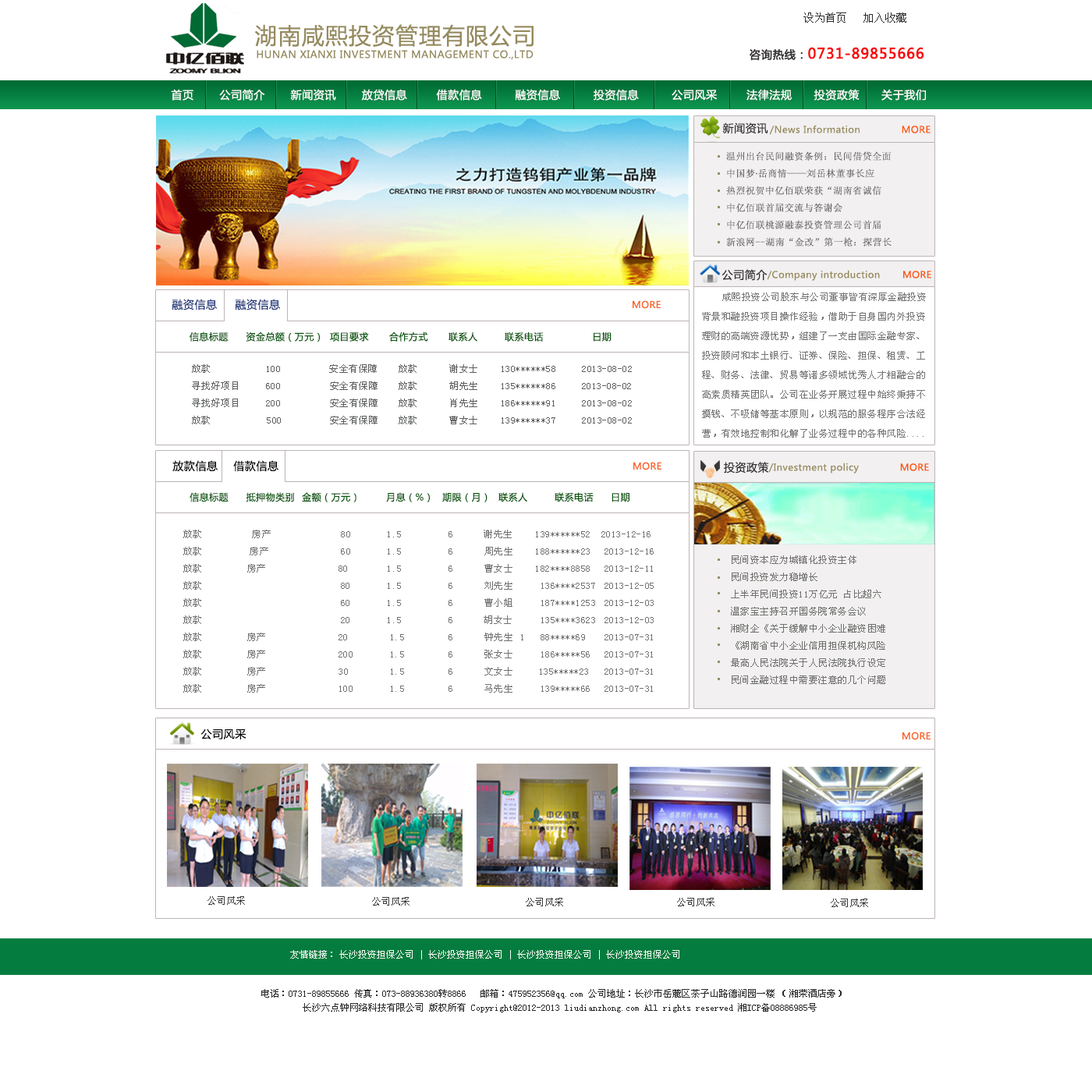
<style>
.page{position:relative;width:1092px;height:1092px;background:#ffffff}
.page>*{position:absolute;margin:0}
.t1{font:10.9px "SimSun";color:#2c2c2c}
.t2{font:22.6px "MicrosoftYaHei";letter-spacing:0.04em;color:#968b5e}
.t3{font:10px "MicrosoftYaHei";letter-spacing:0.04em;color:#968b5e}
.t4{font:14px "MicrosoftYaHei";letter-spacing:0.04em;color:#fa0606;font-weight:bold}
.t5{font:10.9px "MicrosoftYaHei";letter-spacing:0.04em;color:#333030;font-weight:bold}
.t6{font:10.9px "MicrosoftYaHei";letter-spacing:0.04em;color:#ffffff}
.t7{font:10.9px "MicrosoftYaHei";letter-spacing:0.04em;color:#333030}
.t8{font:9.4px "MicrosoftYaHei";letter-spacing:0.04em;color:#968b5e}
.t9{font:9.4px "MicrosoftYaHei";letter-spacing:0.04em;color:#fa5403}
.t10{font:9.4px/17.2px "SimSun";letter-spacing:0.04em;color:#666363}
.t11{font:9.4px/17.2px "MicrosoftYaHei";letter-spacing:0.04em;color:#666363}
.t12{font:9.4px/19.5px "SimSun";letter-spacing:0.04em;color:#757474}
.t13{font:10.9px "MicrosoftYaHei";letter-spacing:0.04em;color:#23387b}
.t14{font:9.4px "MicrosoftYaHei";letter-spacing:0.04em;color:#fa6123}
.t15{font:9.4px "MicrosoftYaHei";letter-spacing:0.04em;color:#055709}
.t16{font:9.4px/17.2px "SimSun";letter-spacing:0.04em;color:#5c5f5d}
.t17{font:10.9px "MicrosoftYaHei";letter-spacing:0.04em;color:#000000}
.t18{font:11.2px "MicrosoftYaHei";letter-spacing:0.04em;color:#333030;scale:0.97 1}
.t19{font:9.4px/17.2px "SimSun";letter-spacing:0.04em;color:#707270}
.t20{font:10.9px "MicrosoftYaHei";letter-spacing:0.04em;color:#000102}
.t21{font:9.4px "SimSun";letter-spacing:0.04em;color:#3d3c3c}
.t22{font:9.4px "SimSun";color:#fcf9f9}
.t23{font:9.4px/14px "SimSun";color:#2b2929}
</style>
<div class="page">
<p class="t1" style="left:803px;top:12px;width:103px;height:11px">设为首页   加入收藏</p>
<p class="t2" style="left:255px;top:24px;width:279px;height:23px">湖南咸熙投资管理有限公司</p>
<p class="t3" style="left:257px;top:50px;width:277px;height:10px">HUNAN XIANXI INVESTMENT MANAGEMENT CO.,LTD</p>
<p class="t4" style="left:750px;top:47px;width:174px;height:14px"><span class="t5">咨询热线：</span>0731-89855666</p>
<p class="t6" style="left:171px;top:89px;width:755px;height:12px">首页       公司简介       新闻资讯       放贷信息        借款信息         融资信息         投资信息         公司风采        法律法规      投资政策      关于我们</p>
<p class="t7" style="left:722px;top:122px;width:46px;height:12px">新闻资讯</p>
<p class="t8" style="left:769px;top:125px;width:162px;height:10px">/News Information             <span class="t9">MORE</span></p>
<p class="t10" style="left:726px;top:151px;width:166px;height:95px">温州出台民间融资条例：民间借贷全面<br>中国梦<span class="t11">∙</span>岳商情——刘岳林董事长应<br>热烈祝贺中亿佰联荣获“湖南省诚信<br>中亿佰联首届交流与答谢会<br>中亿佰联桃源融泰投资管理公司首届<br>新浪网--湖南“金改”第一枪：探营长</p>
<p class="t7" style="left:721px;top:269px;width:47px;height:12px">公司简介</p>
<p class="t8" style="left:767px;top:270px;width:164px;height:11px">/Company introduction       <span class="t9">MORE</span></p>
<p class="t12" style="left:702px;top:292px;width:224px;height:146px">咸熙投资公司股东与公司董事皆有深厚金融投资<br>背景和融投资项目操作经验，借助于自身国内外投资<br>理财的高端资源优势，组建了一支由国际金融专家、<br>投资顾问和本土银行、证券、保险、担保、租赁、工<br>程、财务、法律、贸易等诸多领域优秀人才相融合的<br>高素质精英团队。公司在业务开展过程中始终秉持不<br>摸钱、不吸储等基本原则，以规范的服务程序合法经<br>营，有效地控制和化解了业务过程中的各种风险....</p>
<p class="t13" style="left:172px;top:299px;width:45px;height:11px">融资信息</p>
<p class="t13" style="left:235px;top:299px;width:45px;height:11px">融资信息</p>
<p class="t14" style="left:633px;top:300px;width:28px;height:9px">MORE</p>
<p class="t15" style="left:190px;top:331px;width:422px;height:11px">信息标题 资金总额（万元） 项目要求  合作方式   联系人   联系电话             日期</p>
<p class="t16" style="left:192px;top:364px;width:440px;height:60px">放款          100      安全有保障   放款  谢女士 130******58      2013-08-02<br>寻找好项目     600      安全有保障   放款  胡先生 135******86     2013-08-02<br>寻找好项目     200      安全有保障   放款  肖先生 186******91      2013-08-02<br>放款           500      安全有保障   放款  曹女士 139******37      2013-08-02</p>
<p class="t17" style="left:172px;top:460px;width:46px;height:12px">放款信息</p>
<p class="t17" style="left:233px;top:460px;width:45px;height:12px">借款信息</p>
<p class="t14" style="left:633px;top:462px;width:28px;height:8px">MORE</p>
<p class="t18" style="left:724px;top:462px;width:45px;height:11px">投资政策</p>
<p class="t8" style="left:768px;top:463px;width:161px;height:10px">/Investment policy             <span class="t9">MORE</span></p>
<p class="t15" style="left:190px;top:492px;width:439px;height:10px">信息标题 抵押物类别 金额（万元） 月息（%） 期限（月） 联系人 联系电话 日期</p>
<p class="t19" style="left:183px;top:530px;width:471px;height:163px">放款         房产          80        1.5         6      谢先生    139******52  2013-12-16<br>放款        房产          60        1.5         6     周先生    188******23 2013-12-16<br>放款        房产               80        1.5         6     曹女士    182****8858 2013-12-11<br>放款                      80        1.5         6     刘先生     136****2537 2013-12-05<br>放款                      60        1.5         6     曹小姐     187****1253 2013-12-03<br>放款                      20        1.5         6      胡女士     135****3623 2013-12-03<br>放款        房产               20         1.5         6     钟先生 1   88*****69 2013-07-31<br>放款        房产               200       1.5         6     张女士     186*****56 2013-07-31<br>放款        房产              30      1.5         6     文女士     135*****23 2013-07-31<br>放款        房产               100   1.5         6     马先生     139*****66 2013-07-31</p>
<p class="t19" style="left:731px;top:555px;width:154px;height:129px">民间资本应为城镇化投资主体<br>民间投资发力稳增长<br>上半年民间投资11万亿元 占比超六<br>温家宝主持召开国务院常务会议<br>湘财企《关于缓解中小企业融资困难<br>《湖南省中小企业信用担保机构风险<br>最高人民法院关于人民法院执行设定<br>民间金融过程中需要注意的几个问题</p>
<p class="t20" style="left:200px;top:729px;width:46px;height:10px">公司风采</p>
<p class="t14" style="left:902px;top:732px;width:29px;height:8px">MORE</p>
<p class="t21" style="left:207px;top:896px;width:38px;height:9px">公司风采</p>
<p class="t21" style="left:372px;top:897px;width:37px;height:9px">公司风采</p>
<p class="t21" style="left:526px;top:898px;width:37px;height:8px">公司风采</p>
<p class="t21" style="left:677px;top:898px;width:37px;height:8px">公司风采</p>
<p class="t21" style="left:831px;top:899px;width:37px;height:8px">公司风采</p>
<p class="t22" style="left:290px;top:950px;width:389px;height:9px">友情链接： 长沙投资担保公司 | 长沙投资担保公司 | 长沙投资担保公司 | 长沙投资担保公司</p>
<p class="t23" style="left:261px;top:989px;width:581px;height:23px">电话：0731-89855666 传真：073-88936380转8866   邮箱：475952356@qq.com 公司地址：长沙市岳麓区茶子山路德润园一楼 （湘荣酒店旁）<br>         长沙六点钟网络科技有限公司 版权所有 Copyright@2012-2013 liudianzhong.com All rights reserved 湘ICP备08886985号</p>
</div>
